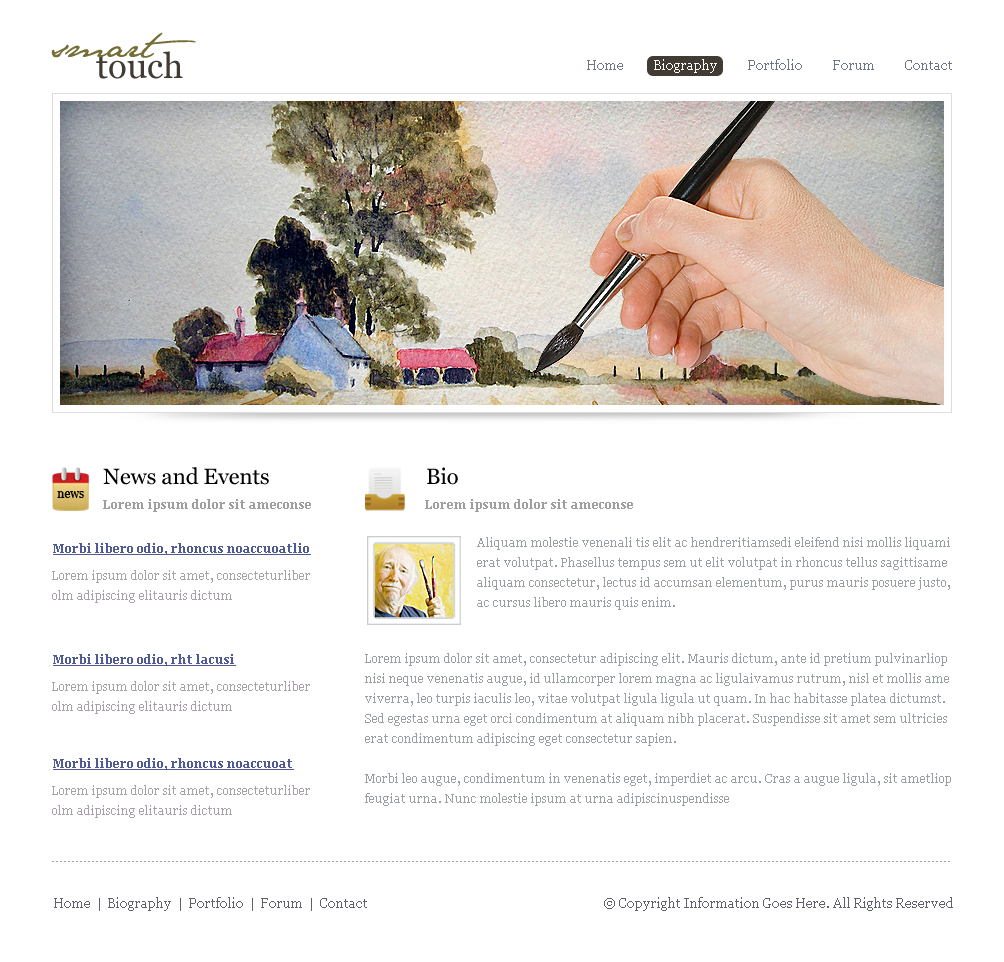
<style>
.page{position:relative;width:1004px;height:962px;background:#ffffff}
.page>*{position:absolute;margin:0}
.t1{font:35px "JaneAusten";color:#756f37}
.t2{font:35px "Georgia";color:#423b34}
.t3{font:22px "Georgia";color:#000000}
.t4{font:12px "Georgia";color:#000000}
.t5{font:12px "Georgia-Bold";color:#9f9f9f}
.t6{font:12px "Georgia-Bold";color:#505a94;text-decoration:underline}
.t7{font:12px/20px "Georgia";color:#9a9fa3}
.t8{font:12px/20px "Georgia";color:#a7a2a8}
.t9{font:13px "Georgia";color:#5f626a}
</style>
<div class="page">
<p class="t1" style="left:51px;top:32px;width:145px;height:26px">smart</p>
<p class="t2" style="left:96px;top:51px;width:87px;height:28px">touch</p>
<p class="t3" style="left:103px;top:467px;width:166px;height:18px">News and Events</p>
<p class="t3" style="left:427px;top:467px;width:31px;height:18px">Bio</p>
<p class="t4" style="left:57px;top:491px;width:27px;height:7px">news</p>
<p class="t5" style="left:103px;top:499px;width:208px;height:13px">Lorem ipsum dolor sit ameconse</p>
<p class="t5" style="left:425px;top:499px;width:208px;height:13px">Lorem ipsum dolor sit ameconse</p>
<p class="t6" style="left:53px;top:543px;width:258px;height:12px">Morbi libero odio, rhoncus noaccuoatlio</p>
<p class="t7" style="left:477px;top:537px;width:473px;height:73px">Aliquam molestie venenali tis elit ac hendreritiamsedi eleifend nisi mollis liquami erat volutpat. Phasellus tempus sem ut elit volutpat in rhoncus tellus sagittisame aliquam consectetur, lectus id accumsan elementum, purus mauris posuere justo, ac cursus libero mauris quis enim.</p>
<p class="t8" style="left:52px;top:570px;width:258px;height:33px">Lorem ipsum dolor sit amet, consecteturliber<br>olm adipiscing elitauris dictum</p>
<p class="t6" style="left:53px;top:654px;width:183px;height:12px">Morbi libero odio, rht lacusi</p>
<p class="t7" style="left:365px;top:653px;width:586px;height:153px">Lorem ipsum dolor sit amet, consectetur adipiscing elit. Mauris dictum, ante id pretium pulvinarliop nisi neque venenatis augue, id ullamcorper lorem magna ac ligulaivamus rutrum, nisl et mollis ame viverra, leo turpis iaculis leo, vitae volutpat ligula ligula ut quam. In hac habitasse platea dictumst. Sed egestas urna eget orci condimentum at aliquam nibh placerat. Suspendisse sit amet sem ultricies erat condimentum adipiscing eget consectetur sapien. <br><br>Morbi leo augue, condimentum in venenatis eget, imperdiet ac arcu. Cras a augue ligula, sit ametliop feugiat urna. Nunc molestie ipsum at urna adipiscinuspendisse</p>
<p class="t8" style="left:52px;top:681px;width:258px;height:33px">Lorem ipsum dolor sit amet, consecteturliber<br>olm adipiscing elitauris dictum</p>
<p class="t6" style="left:53px;top:758px;width:241px;height:12px">Morbi libero odio, rhoncus noaccuoat</p>
<p class="t8" style="left:52px;top:785px;width:258px;height:33px">Lorem ipsum dolor sit amet, consecteturliber<br>olm adipiscing elitauris dictum</p>
<p class="t9" style="left:54px;top:897px;width:313px;height:14px">Home  |  Biography  |  Portfolio  |  Forum  |  Contact</p>
<p class="t9" style="left:604px;top:897px;width:349px;height:14px">© Copyright Information Goes Here. All Rights Reserved</p>
</div>
